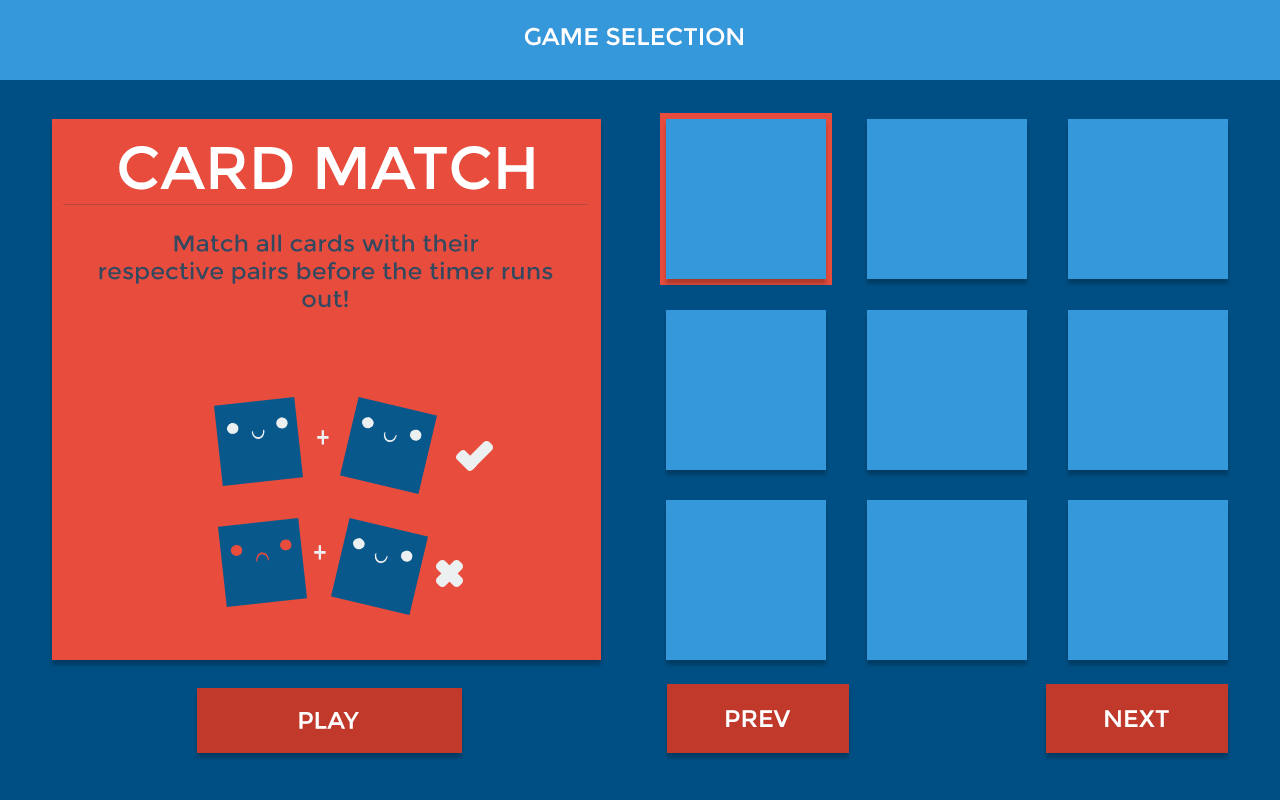
<style>
.page{position:relative;width:1280px;height:800px;background:#3498db}
.page>*{position:absolute;margin:0}
.t1{font:24px "Montserrat-Regular";color:#ffffff}
.t2{font:60px "Montserrat-Regular";color:#ffffff}
.t3{font:23.1px "Montserrat-Regular";color:#34495e;scale:1.04 1}
.t4{font:30px "Montserrat-Regular";color:#ecf0f1;scale:0.8 1}
</style>
<div class="page">
<p class="t1" style="left:525px;top:27px;width:218px;height:19px">GAME SELECTION</p>
<p class="t2" style="left:119px;top:146px;width:415px;height:44px">CARD MATCH</p>
<p class="t3" style="left:99px;top:234px;width:454px;height:74px;text-align:center">Match all cards with their <br>respective pairs before the timer runs out!</p>
<p class="t4" style="left:317px;top:430px;width:12px;height:15px">+</p>
<p class="t4" style="left:314px;top:545px;width:12px;height:15px">+</p>
<p class="t1" style="left:299px;top:712px;width:60px;height:17px">PLAY</p>
<p class="t1" style="left:726px;top:710px;width:65px;height:17px">PREV</p>
<p class="t1" style="left:1105px;top:710px;width:64px;height:17px">NEXT</p>
</div>
